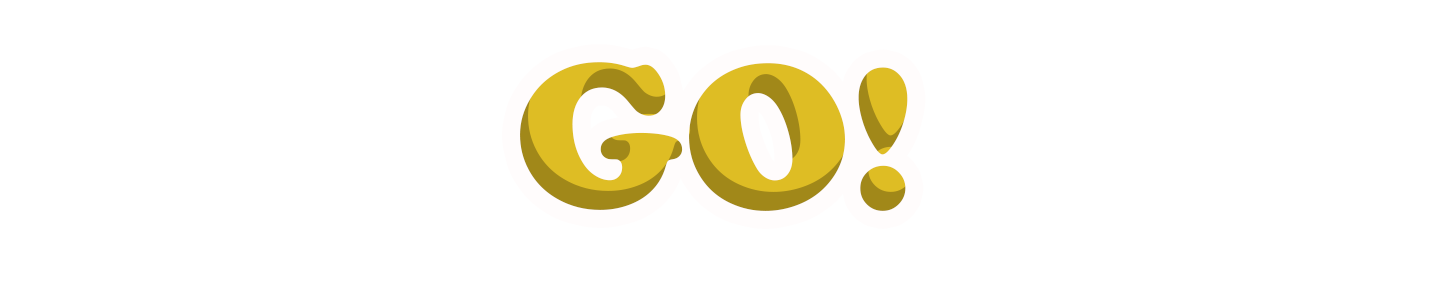
<style>
.page{position:relative;width:1430px;height:295px;background:#ffffff}
.page>*{position:absolute;margin:0}
.t1{font:213px "CooperBlack";color:#debd24}
</style>
<div class="page">
<p class="t1" style="left:520px;top:62px;width:388px;height:149px">GO!</p>
</div>
